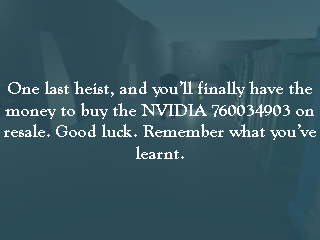
<style>
.page{position:relative;width:320px;height:240px}
.page>*{position:absolute;margin:0}
.t1{font:18px "GoudyOldStyleT-Bold";color:#ffffff}
</style>
<div class="page">
<p class="t1" style="left:4px;top:81px;width:312px;height:78px;text-align:center">One last heist, and you’ll finally have the<br>money to buy the NVIDIA 760034903 on<br>resale. Good luck. Remember what you’ve<br>learnt.</p>
</div>
